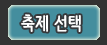
<style>
.page{position:relative;width:107px;height:45px;background:#333333}
.page>*{position:absolute;margin:0}
.t1{font:18px "NanumBarunpen-Bold";color:#ffffff}
</style>
<div class="page">
<p class="t1" style="left:21px;top:14px;width:60px;height:18px">축제 선택</p>
</div>
